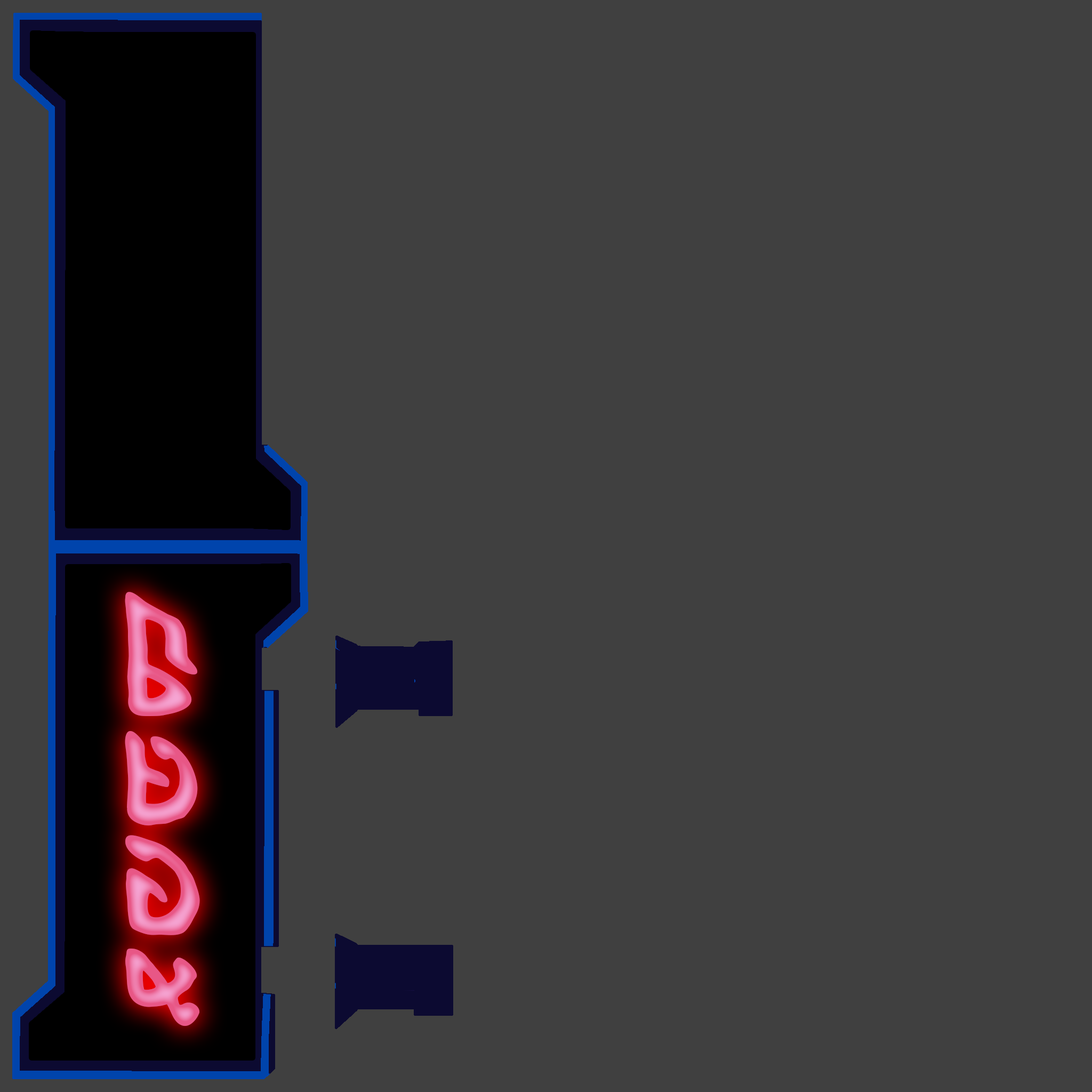
<style>
.page{position:relative;width:1092px;height:1092px;background:#404040}
.page>*{position:absolute;margin:0}
.t1{font:100.2px "WeComeInPeaceBB-BoldItalic";letter-spacing:-0.02em}
</style>
<div class="page">
<p class="t1" style="left:125px;top:592px;width:75px;height:434px;rotate:90deg">Help</p>
</div>
